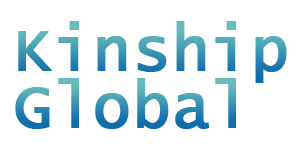
<style>
.page{position:relative;width:300px;height:150px;background:#ffffff}
.page>*{position:absolute;margin:0}
.t1{font:62.5px "LucidaConsole";font-weight:bold}
</style>
<div class="page">
<p class="t1" style="left:18px;top:21px;width:269px;height:62px">Kinship</p>
<p class="t1" style="left:15px;top:78px;width:221px;height:51px">Global</p>
</div>
